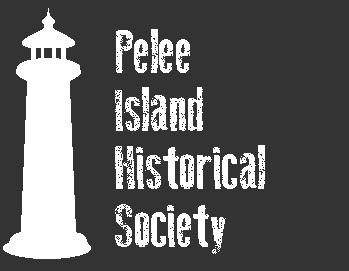
<style>
.page{position:relative;width:349px;height:271px;background:#333333}
.page>*{position:absolute;margin:0}
.t1{font:60.6px/58px "OldPress";color:#ffffff}
</style>
<div class="page">
<p class="t1" style="left:115px;top:29px;width:150px;height:225px">Pelee<br>Island<br>Historical <br>Society</p>
</div>
